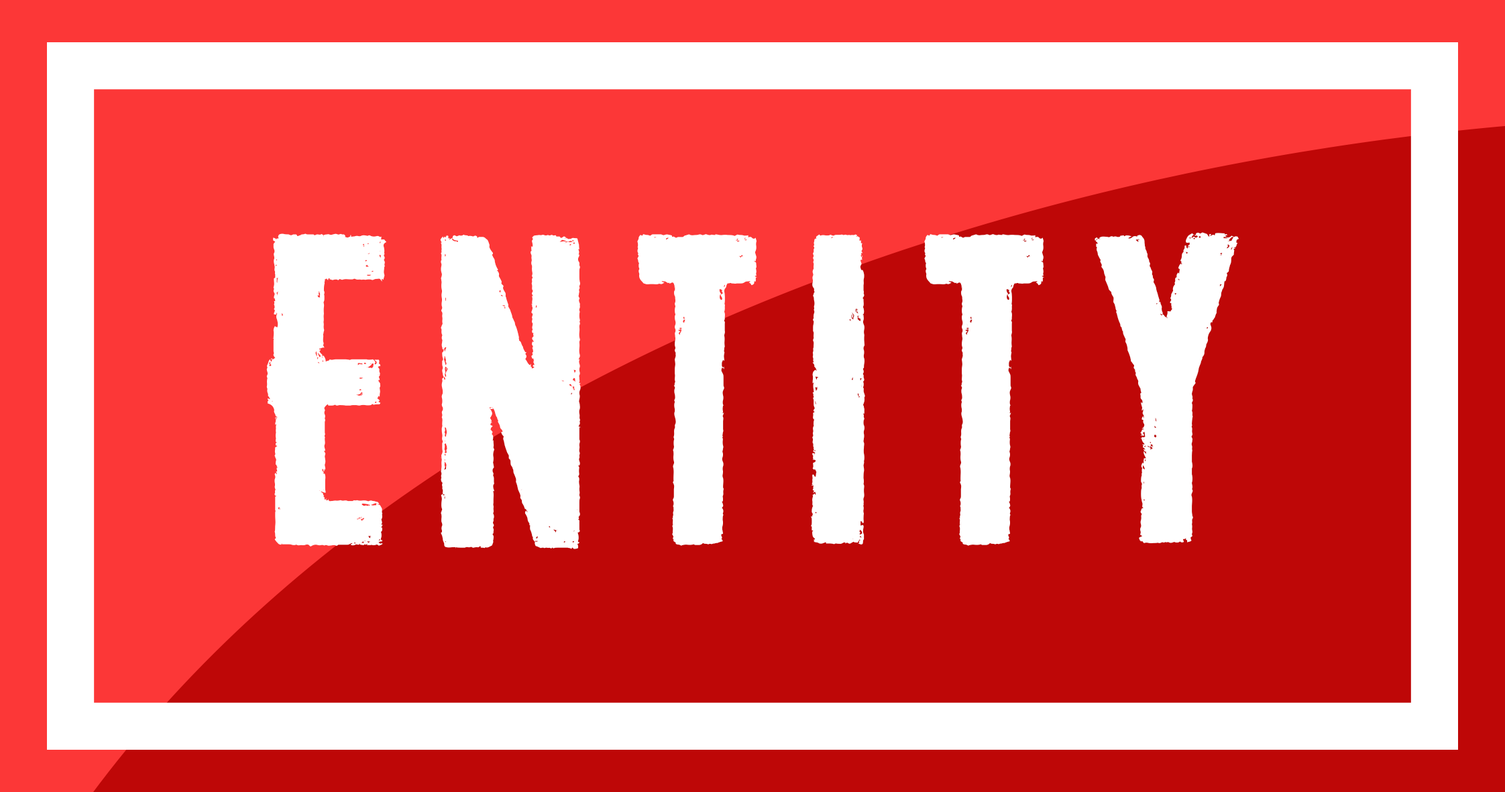
<style>
.page{position:relative;width:1505px;height:792px;background:#be0707}
.page>*{position:absolute;margin:0}
.t1{font:419.2px "HeadlinerNo.45";letter-spacing:0.1em;color:#ffffff}
</style>
<div class="page">
<p class="t1" style="left:266px;top:232px;width:973px;height:317px">ENTITY</p>
</div>
